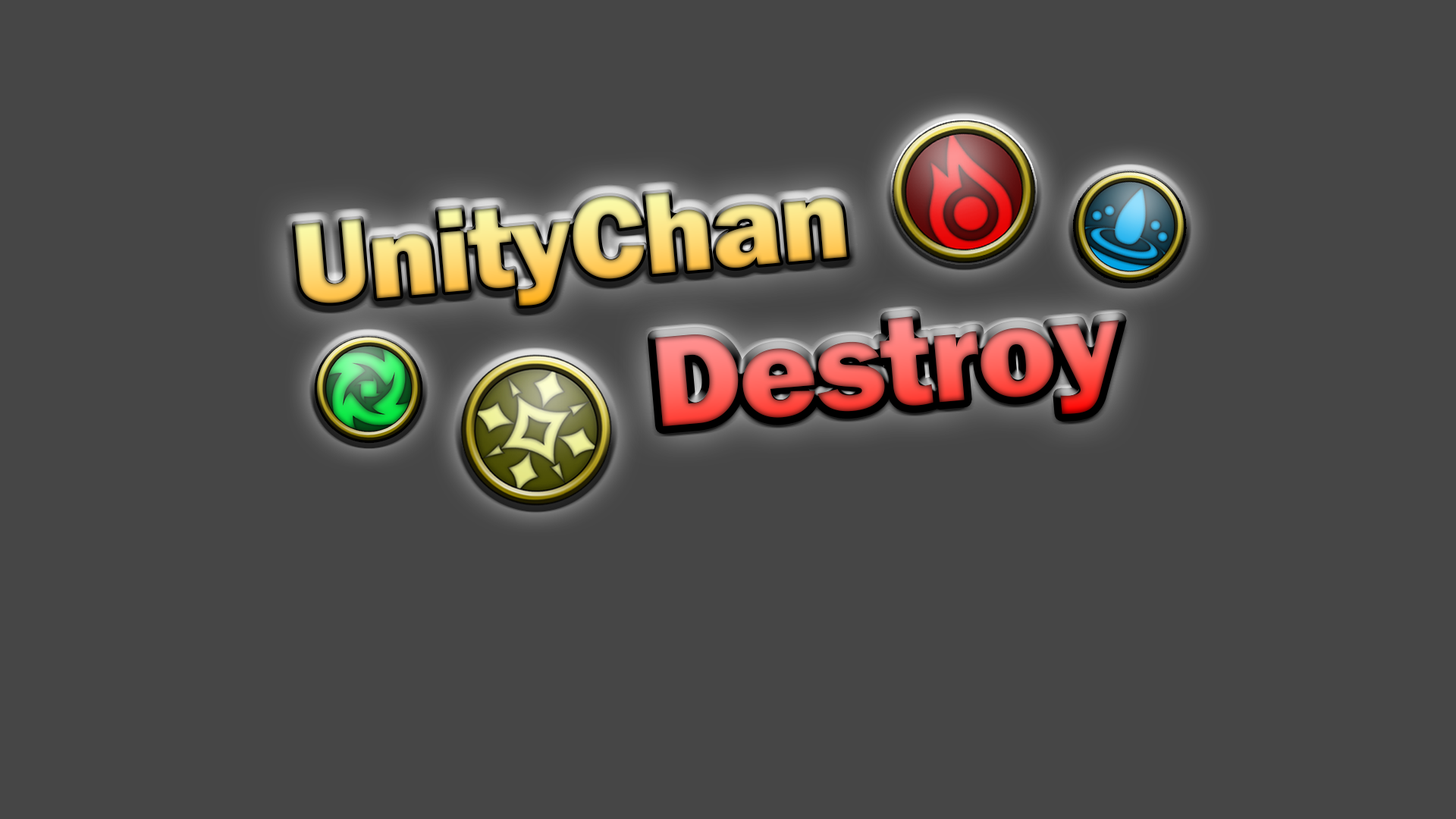
<style>
.page{position:relative;width:1456px;height:819px;background:#464646}
.page>*{position:absolute;margin:0}
.t1{font:120.2px "FranklinGothic-Heavy";letter-spacing:-0.02em}
.t2{font:133.4px "FranklinGothic-Heavy";letter-spacing:-0.02em}
</style>
<div class="page">
<p class="t1" style="left:294px;top:192px;width:553px;height:114px;rotate:-5deg">UnityChan</p>
<p class="t2" style="left:654px;top:316px;width:465px;height:111px;rotate:-5deg">Destroy</p>
</div>
